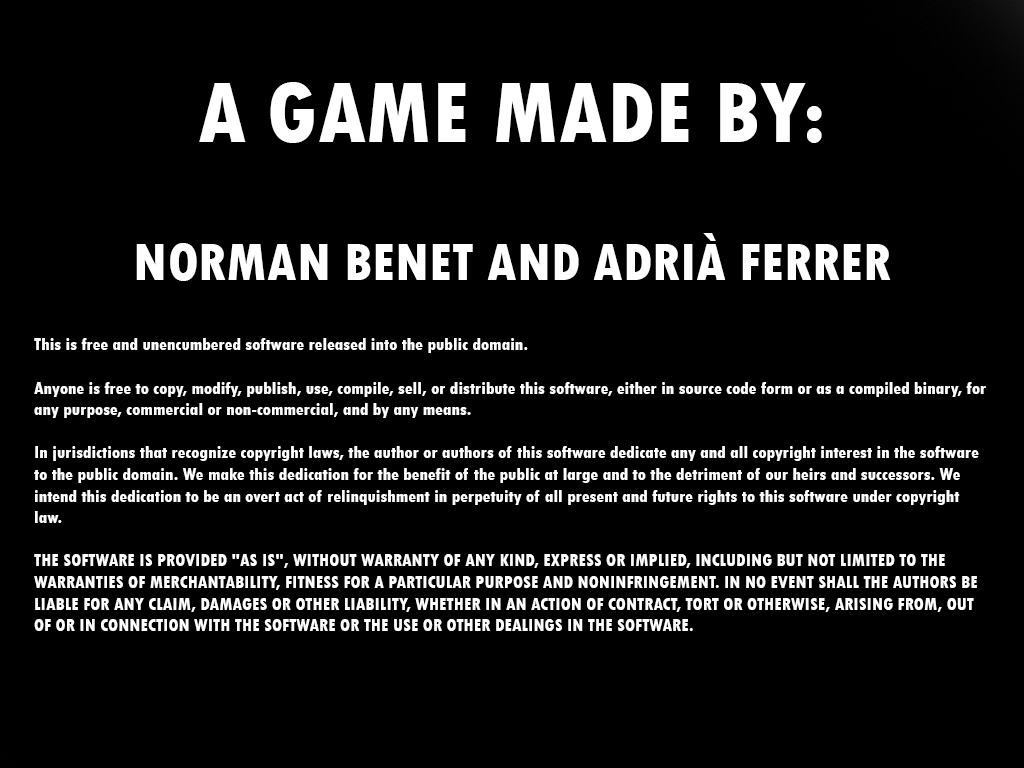
<style>
.page{position:relative;width:1024px;height:768px;background:#000000}
.page>*{position:absolute;margin:0}
.t1{font:90px "TwCenMT-CondensedExtraBold";color:#ffffff}
.t2{font:55px "TwCenMT-CondensedExtraBold";color:#ffffff}
.t3{font:60px "TwCenMT-CondensedExtraBold";color:#ffffff}
.t4{font:18px "TwCenMT-CondensedExtraBold";color:#ffffff}
</style>
<div class="page">
<p class="t1" style="left:199px;top:82px;width:623px;height:61px">A GAME MADE BY:</p>
<p class="t2" style="left:136px;top:233px;width:755px;height:48px"><span class="t3"><br><br></span>NORMAN BENET AND ADRIÀ FERRER</p>
<p class="t4" style="left:34px;top:338px;width:952px;height:293px">This is free and unencumbered software released into the public domain.<br><br>Anyone is free to copy, modify, publish, use, compile, sell, or distribute this software, either in source code form or as a compiled binary, for any purpose, commercial or non-commercial, and by any means.<br><br>In jurisdictions that recognize copyright laws, the author or authors of this software dedicate any and all copyright interest in the software to the public domain. We make this dedication for the benefit of the public at large and to the detriment of our heirs and successors. We intend this dedication to be an overt act of relinquishment in perpetuity of all present and future rights to this software under copyright law.<br><br>THE SOFTWARE IS PROVIDED "AS IS", WITHOUT WARRANTY OF ANY KIND, EXPRESS OR IMPLIED, INCLUDING BUT NOT LIMITED TO THE WARRANTIES OF MERCHANTABILITY, FITNESS FOR A PARTICULAR PURPOSE AND NONINFRINGEMENT. IN NO EVENT SHALL THE AUTHORS BE LIABLE FOR ANY CLAIM, DAMAGES OR OTHER LIABILITY, WHETHER IN AN ACTION OF CONTRACT, TORT OR OTHERWISE, ARISING FROM, OUT OF OR IN CONNECTION WITH THE SOFTWARE OR THE USE OR OTHER DEALINGS IN THE SOFTWARE.</p>
</div>
